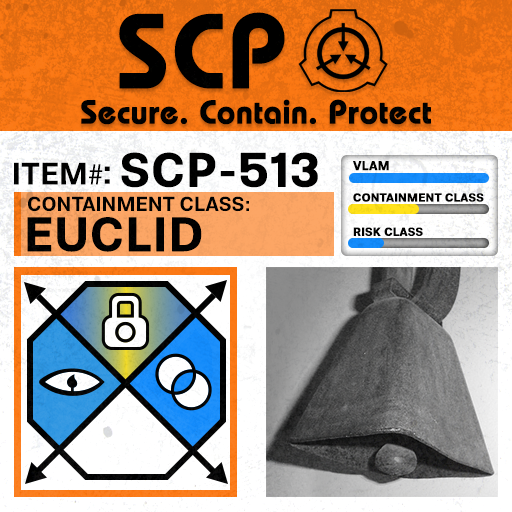
<style>
.page{position:relative;width:512px;height:512px}
.page>*{position:absolute;margin:0}
.t1{font:105.8px "BauhausLT-Demi";color:#000000;font-weight:bold}
.t2{font:33px "BauhausLT-Demi";color:#000000;font-weight:bold}
.t3{font:47.6px "Molde-Semibold";color:#000000;font-weight:bold}
.t4{font:12.5px "Molde-Semibold";color:#000000;font-weight:bold}
.t5{font:31.1px "Molde-Semibold";color:#000000}
.t6{font:31.1px "MyriadPro-Regular";color:#000000}
.t7{font:34.5px "Molde-Semibold";color:#000000}
.t8{font:20.3px "Molde-Semibold";color:#000000}
.t9{font:11.7px "Molde-Semibold";color:#000000;font-weight:bold}
.t10{font:47.8px "Molde-Semibold";color:#000000;font-weight:bold}
</style>
<div class="page">
<p class="t1" style="left:119px;top:12px;width:166px;height:77px">SCP</p>
<p class="t2" style="left:81px;top:99px;width:350px;height:26px">Secure. Contain. Protect</p>
<p class="t3" style="left:121px;top:152px;width:197px;height:36px">SCP-513</p>
<p class="t4" style="left:353px;top:161px;width:36px;height:10px">VLAM</p>
<p class="t5" style="left:14px;top:162px;width:89px;height:23px">ITEM<span class="t6">#</span></p>
<p class="t7" style="left:104px;top:166px;width:6px;height:18px">:</p>
<p class="t8" style="left:28px;top:196px;width:221px;height:16px">CONTAINMENT CLASS:</p>
<p class="t9" style="left:353px;top:193px;width:131px;height:9px">CONTAINMENT CLASS</p>
<p class="t10" style="left:27px;top:217px;width:175px;height:35px">EUCLID</p>
<p class="t9" style="left:353px;top:227px;width:70px;height:9px">RISK CLASS</p>
</div>
